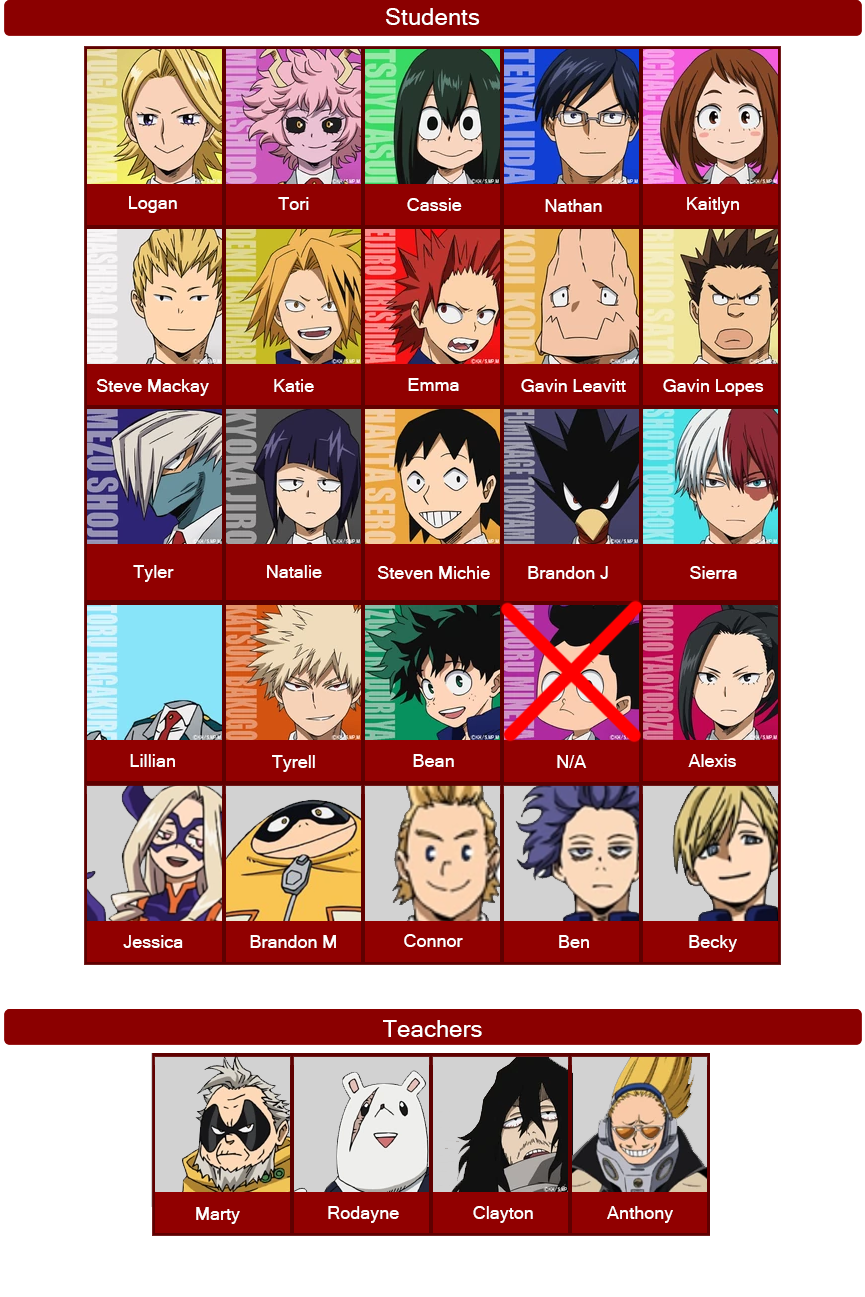
<style>
.page{position:relative;width:865px;height:1297px;background:#ffffff}
.page>*{position:absolute;margin:0}
.t1{font:24px "MicrosoftSansSerif";color:#ffffff}
.t2{font:18px "MicrosoftSansSerif";color:#ffffff}
</style>
<div class="page">
<p class="t1" style="left:386px;top:8px;width:94px;height:17px">Students</p>
<p class="t2" style="left:129px;top:196px;width:48px;height:17px">Logan</p>
<p class="t2" style="left:278px;top:197px;width:31px;height:13px">Tori</p>
<p class="t2" style="left:407px;top:198px;width:55px;height:13px">Cassie</p>
<p class="t2" style="left:687px;top:197px;width:52px;height:17px">Kaitlyn</p>
<p class="t2" style="left:545px;top:199px;width:57px;height:13px">Nathan</p>
<p class="t2" style="left:97px;top:379px;width:112px;height:17px">Steve Mackay</p>
<p class="t2" style="left:274px;top:379px;width:40px;height:13px">Katie</p>
<p class="t2" style="left:408px;top:378px;width:51px;height:13px">Emma</p>
<p class="t2" style="left:521px;top:379px;width:105px;height:13px">Gavin Leavitt</p>
<p class="t2" style="left:663px;top:379px;width:101px;height:17px">Gavin Lopes</p>
<p class="t2" style="left:133px;top:565px;width:41px;height:17px">Tyler</p>
<p class="t2" style="left:267px;top:565px;width:55px;height:13px">Natalie</p>
<p class="t2" style="left:378px;top:566px;width:112px;height:13px">Steven Michie</p>
<p class="t2" style="left:528px;top:566px;width:80px;height:13px">Brandon J</p>
<p class="t2" style="left:690px;top:566px;width:47px;height:13px">Sierra</p>
<p class="t2" style="left:130px;top:754px;width:45px;height:13px">Lillian</p>
<p class="t2" style="left:272px;top:755px;width:43px;height:17px">Tyrell</p>
<p class="t2" style="left:413px;top:754px;width:41px;height:13px">Bean</p>
<p class="t2" style="left:557px;top:755px;width:30px;height:13px">N/A</p>
<p class="t2" style="left:688px;top:754px;width:48px;height:13px">Alexis</p>
<p class="t2" style="left:123px;top:935px;width:60px;height:13px">Jessica</p>
<p class="t2" style="left:250px;top:935px;width:86px;height:13px">Brandon M</p>
<p class="t2" style="left:404px;top:934px;width:59px;height:13px">Connor</p>
<p class="t2" style="left:559px;top:935px;width:30px;height:13px">Ben</p>
<p class="t2" style="left:689px;top:935px;width:48px;height:17px">Becky</p>
<p class="t1" style="left:383px;top:1020px;width:99px;height:17px">Teachers</p>
<p class="t2" style="left:328px;top:1206px;width:71px;height:17px">Rodayne</p>
<p class="t2" style="left:473px;top:1206px;width:60px;height:17px">Clayton</p>
<p class="t2" style="left:607px;top:1206px;width:66px;height:17px">Anthony</p>
<p class="t2" style="left:196px;top:1207px;width:44px;height:17px">Marty</p>
</div>
